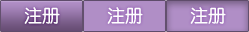
<style>
.page{position:relative;width:249px;height:32px;background:#b08ec6}
.page>*{position:absolute;margin:0}
.t1{font:18px "FZY3JW--GB1-0";color:#ffffff}
</style>
<div class="page">
<p class="t1" style="left:24px;top:7px;width:36px;height:17px">注册</p>
<p class="t1" style="left:107px;top:7px;width:36px;height:17px">注册</p>
<p class="t1" style="left:190px;top:7px;width:36px;height:17px">注册</p>
</div>
